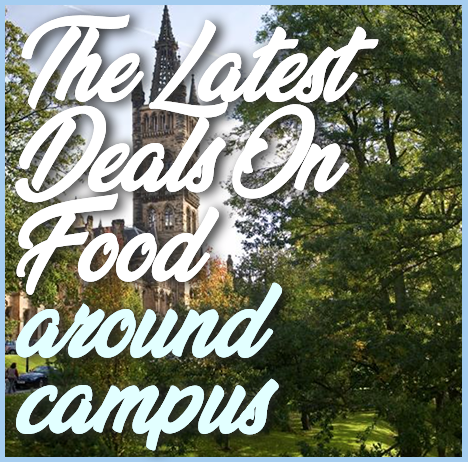
<style>
.page{position:relative;width:468px;height:462px}
.page>*{position:absolute;margin:0}
.t1{font:80px/90px "VeganStylePersonalUse";color:#ffffff}
.t2{font:80px/76px "VeganStylePersonalUse";color:#e2ffff}
</style>
<div class="page">
<p class="t1" style="left:15px;top:14px;width:364px;height:437px">The Latest<br>Deals On<br>Food<br><span class="t2">around<br>campus</span></p>
</div>
